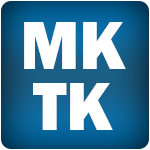
<style>
.page{position:relative;width:150px;height:150px;background:#ffffff}
.page>*{position:absolute;margin:0}
.t1{font:70.8px/61px "FranklinGothic-Heavy";color:#ffffff}
</style>
<div class="page">
<p class="t1" style="left:24px;top:22px;width:102px;height:108px;text-align:center">MK<br>TK</p>
</div>
